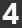
<style>
.page{position:relative;width:22px;height:28px;background:#333333}
.page>*{position:absolute;margin:0}
.t1{font:30px "ProductSans-Bold";color:#ffffff}
</style>
<div class="page">
<p class="t1" style="left:2px;top:3px;width:17px;height:21px">4</p>
</div>
